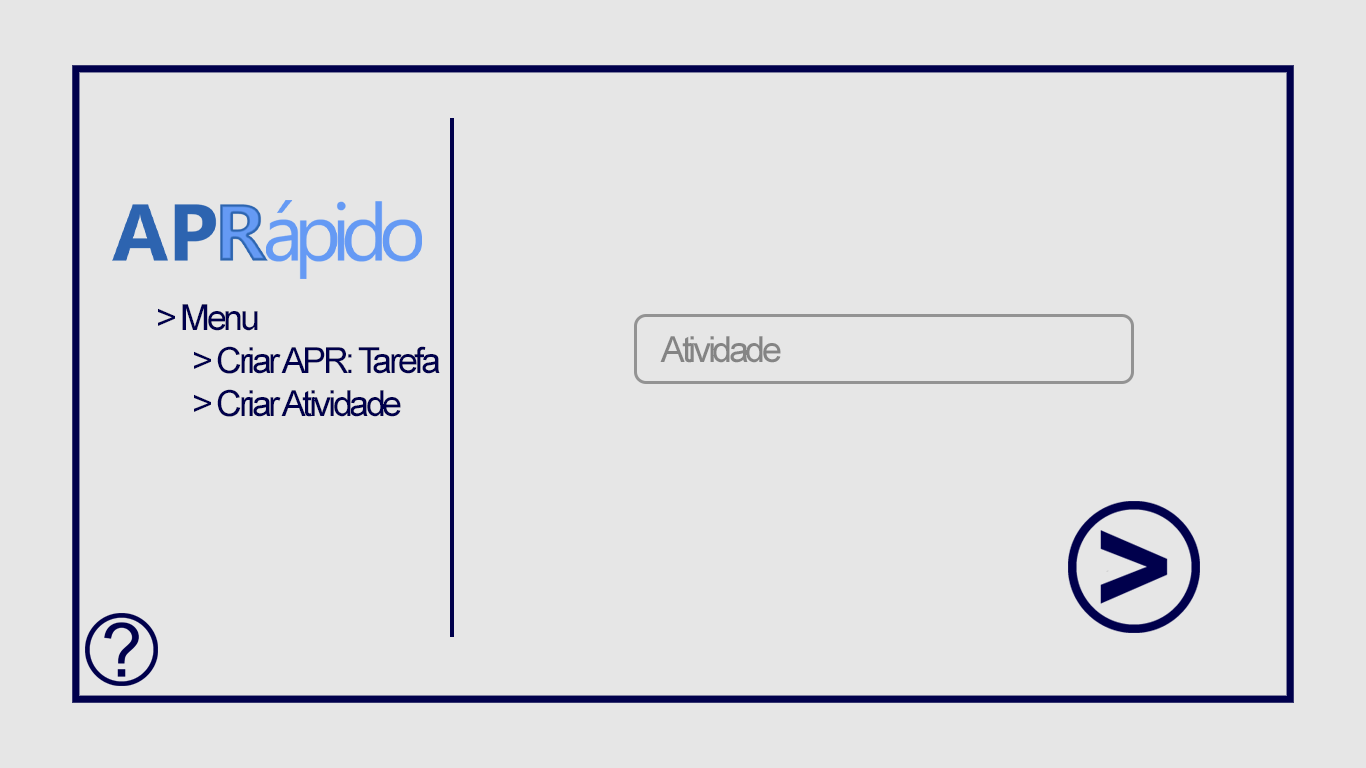
<style>
.page{position:relative;width:1366px;height:768px;background:#e6e6e6}
.page>*{position:absolute;margin:0}
.t1{font:36px "ArialMT";letter-spacing:-0.095em;color:#00004c}
.t2{font:36px "ArialMT";letter-spacing:-0.095em;color:#848484}
</style>
<div class="page">
<p class="t1" style="left:158px;top:304px;width:282px;height:113px">&gt; Menu<br> &gt; Criar APR: Tarefa<br> &gt; Criar Atividade</p>
<p class="t2" style="left:660px;top:336px;width:121px;height:27px">Atividade</p>
</div>
